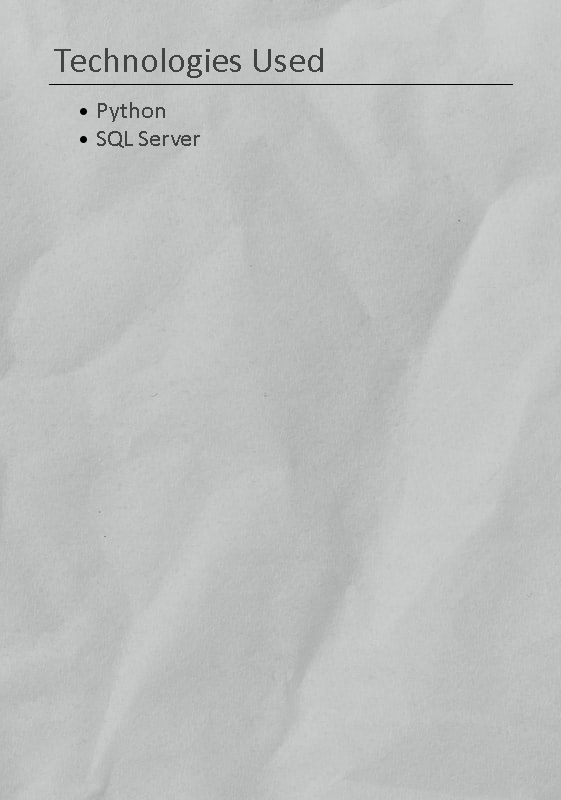
<style>
.page{position:relative;width:561px;height:800px}
.page>*{position:absolute;margin:0}
.t1{font:36px "Calibri";color:#434343}
.t2{font:24px "Calibri";color:#434343}
</style>
<div class="page">
<p class="t1" style="left:54px;top:48px;width:269px;height:30px">Technologies Used</p>
<p class="t2" style="left:97px;top:102px;width:103px;height:46px">Python<br>SQL Server</p>
</div>
